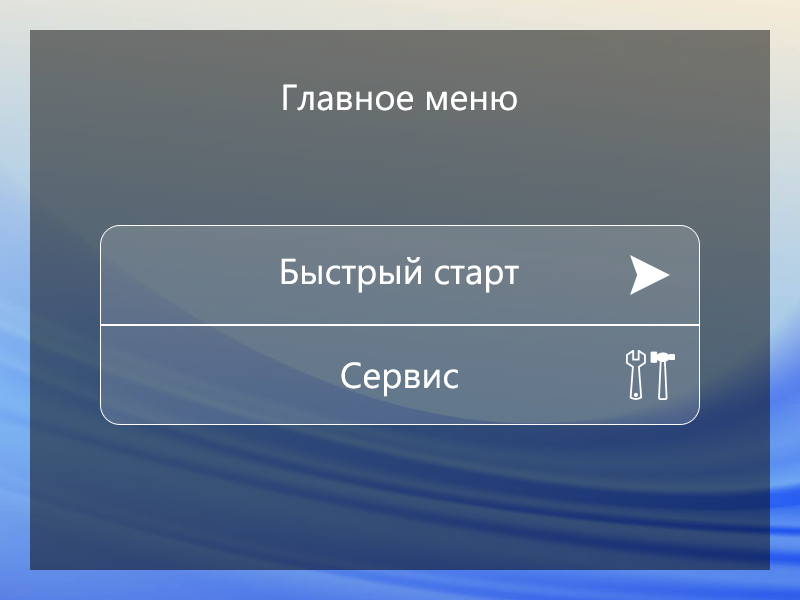
<style>
.page{position:relative;width:800px;height:600px}
.page>*{position:absolute;margin:0}
.t1{font:36px "SegoeUI";color:#ffffff}
</style>
<div class="page">
<p class="t1" style="left:283px;top:84px;width:234px;height:27px">Главное меню</p>
<p class="t1" style="left:281px;top:257px;width:238px;height:36px">Быстрый старт</p>
<p class="t1" style="left:341px;top:362px;width:117px;height:35px">Сервис</p>
</div>
